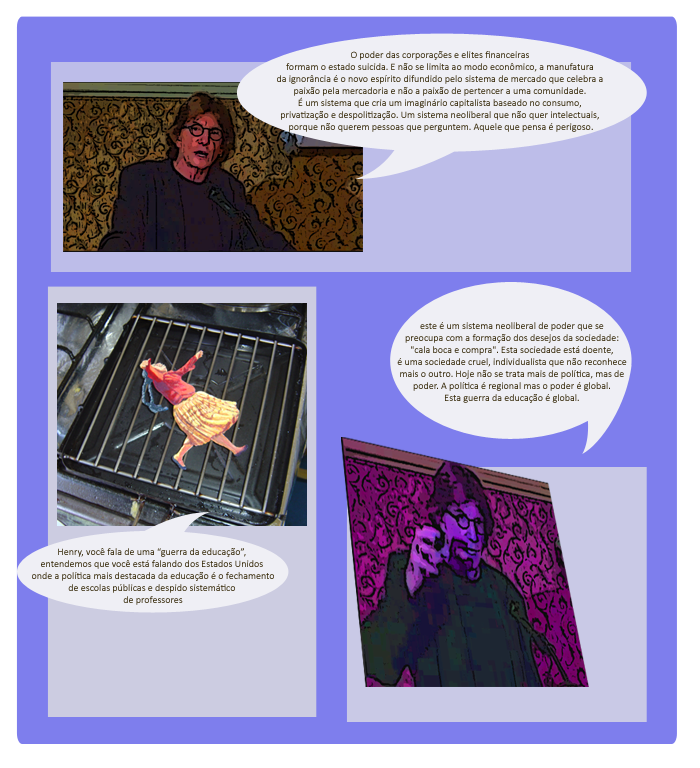
<style>
.page{position:relative;width:700px;height:768px;background:#7e7eed}
.page>*{position:absolute;margin:0}
.t1{font:10px "Calibri"}
.t2{font:10px "Calibri";color:#332605}
</style>
<div class="page">
<p class="t1" style="left:277px;top:51px;width:326px;height:81px;text-align:center">O poder das corporações e elites financeiras <br>formam o estado suicida. E não se limita ao modo econômico, a manufatura <br>da ignorância é o novo espírito difundido pelo sistema de mercado que celebra a <br>paixão pela mercadoria e não a paixão de pertencer a uma comunidade. <br>É um sistema que cria um imaginário capitalista baseado no consumo, <br>privatização e despolitização. Um sistema neoliberal que não quer intelectuais, <br>porque não querem pessoas que perguntem. Aquele que pensa é perigoso.</p>
<p class="t2" style="left:397px;top:322px;width:230px;height:81px;text-align:center">este é um sistema neoliberal de poder que se <br>preocupa com a formação dos desejos da sociedade: <br>"cala boca e compra". Esta sociedade está doente, <br>é uma sociedade cruel, individualista que não reconhece <br>mais o outro. Hoje não se trata mais de política, mas de <br>poder. A política é regional mas o poder é global. <br>Esta guerra da educação é global.</p>
<p class="t1" style="left:32px;top:548px;width:242px;height:57px;text-align:center">Henry, você fala de uma “guerra da educação”, <br>entendemos que você está falando dos Estados Unidos <br>onde a política mais destacada da educação é o fechamento<br>de escolas públicas e despido sistemático <br>de professores</p>
</div>
